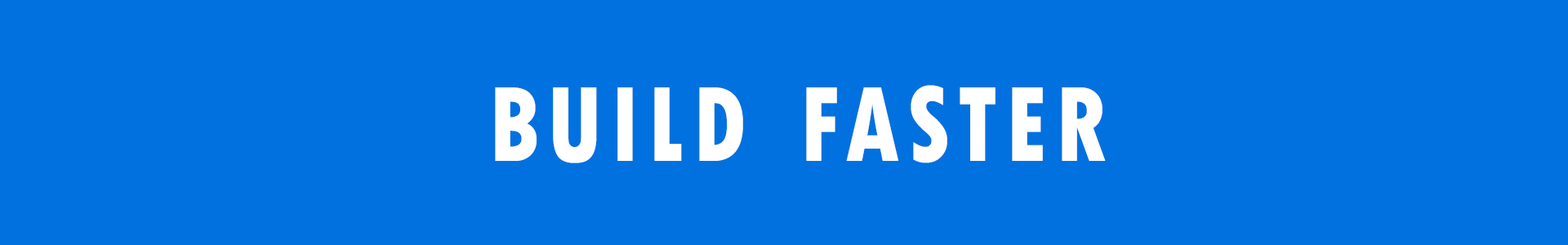
<style>
.page{position:relative;width:1568px;height:245px;background:#0071df}
.page>*{position:absolute;margin:0}
.t1{font:161.2px "TwCenMT-CondensedExtraBold";letter-spacing:0.075em;color:#ffffff;font-variant:small-caps;scale:0.89 1}
</style>
<div class="page">
<p class="t1" style="left:495px;top:85px;width:611px;height:78px">build faster</p>
</div>
